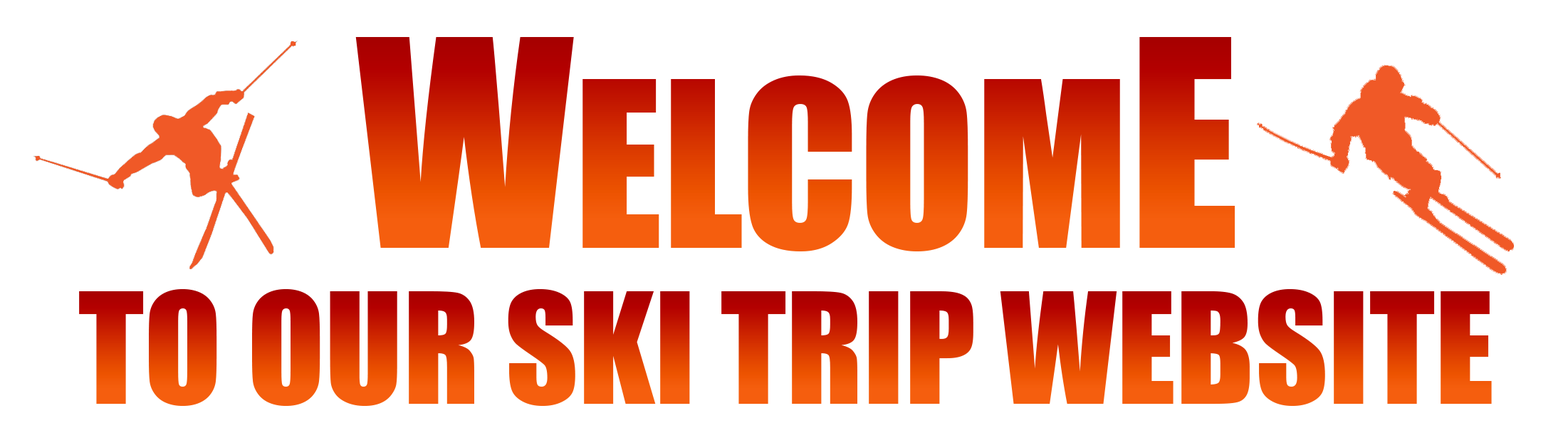
<style>
.page{position:relative;width:1568px;height:423px;background:#ffffff}
.page>*{position:absolute;margin:0}
.t1{font:213.6px "Impact"}
.t2{font:267px "Impact"}
.t3{font:142.4px "Impact"}
</style>
<div class="page">
<p class="t1" style="left:355px;top:37px;width:880px;height:214px"><span class="t2">W</span>ELCOM<span class="t2">E</span></p>
<p class="t3" style="left:79px;top:289px;width:1413px;height:117px">TO OUR SKI TRIP WEBSITE</p>
</div>
